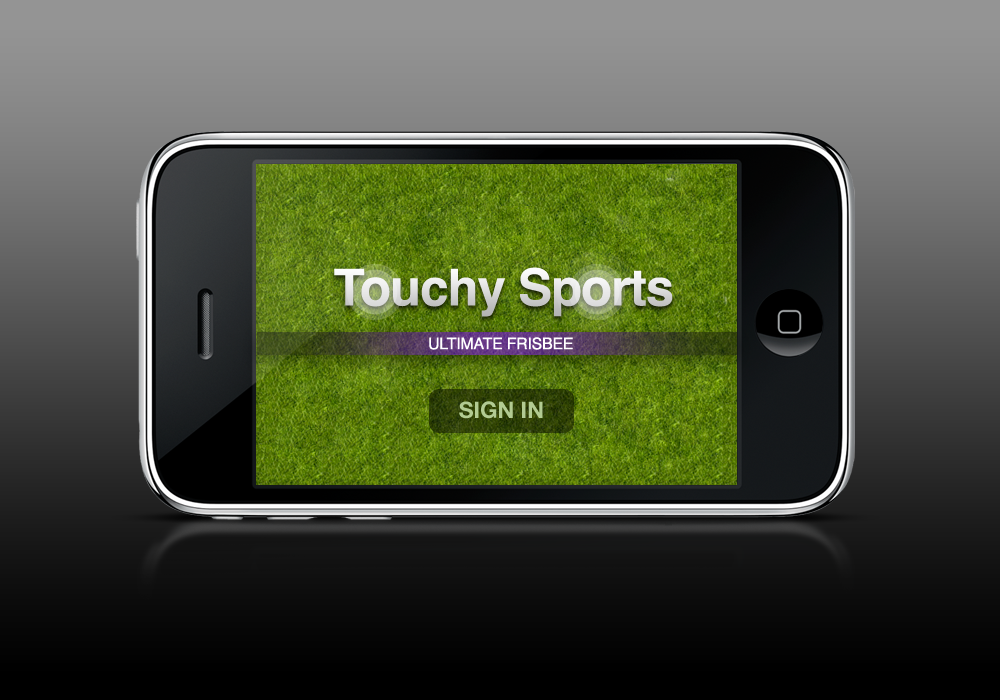
<style>
.page{position:relative;width:1000px;height:700px}
.page>*{position:absolute;margin:0}
.t1{font:50.9px "Helvetica-Bold";letter-spacing:-0.02em;color:#e3e3e3}
.t2{font:16.1px "Helvetica";letter-spacing:-0.02em;color:#ffffff}
.t3{font:22.7px "HelveticaNeue-Bold";color:#b2cb92}
</style>
<div class="page">
<p class="t1" style="left:334px;top:267px;width:339px;height:50px">Touchy Sports</p>
<p class="t2" style="left:429px;top:337px;width:144px;height:13px">ULTIMATE FRISBEE</p>
<p class="t3" style="left:459px;top:401px;width:84px;height:18px">SIGN IN</p>
</div>
